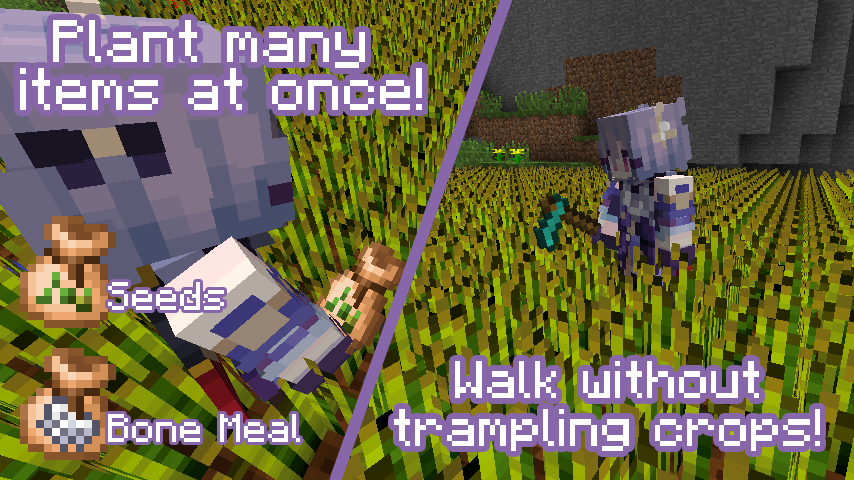
<style>
.page{position:relative;width:854px;height:480px}
.page>*{position:absolute;margin:0}
.t1{font:72px/48px "MinecraftDefaultRegular";color:#ffffff}
.t2{font:48px "MinecraftDefaultRegular";color:#ffffff}
.t3{font:64px/48px "MinecraftDefaultRegular";color:#ffffff}
</style>
<div class="page">
<p class="t1" style="left:20px;top:20px;width:402px;height:90px;text-align:center">Plant many <br>items at once!</p>
<p class="t2" style="left:108px;top:282px;width:116px;height:28px">Seeds</p>
<p class="t3" style="left:394px;top:361px;width:426px;height:90px;text-align:center">Walk without<br>trampling crops!</p>
<p class="t2" style="left:108px;top:414px;width:192px;height:28px">Bone Meal</p>
</div>
